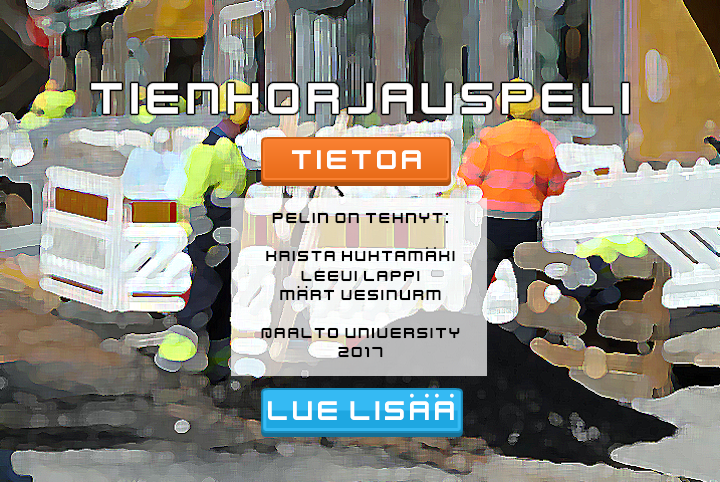
<style>
.page{position:relative;width:720px;height:482px}
.page>*{position:absolute;margin:0}
.t1{font:16px "KenVector-Future";color:#000000}
</style>
<div class="page">
<p class="t1" style="left:261px;top:212px;width:199px;height:146px;text-align:center">Pelin on tehnyt:<br><br>Krista Huhtamäki<br>Leevi Lappi <br>Märt Vesinurm<br><br>@AAlto University<br>2017</p>
</div>
